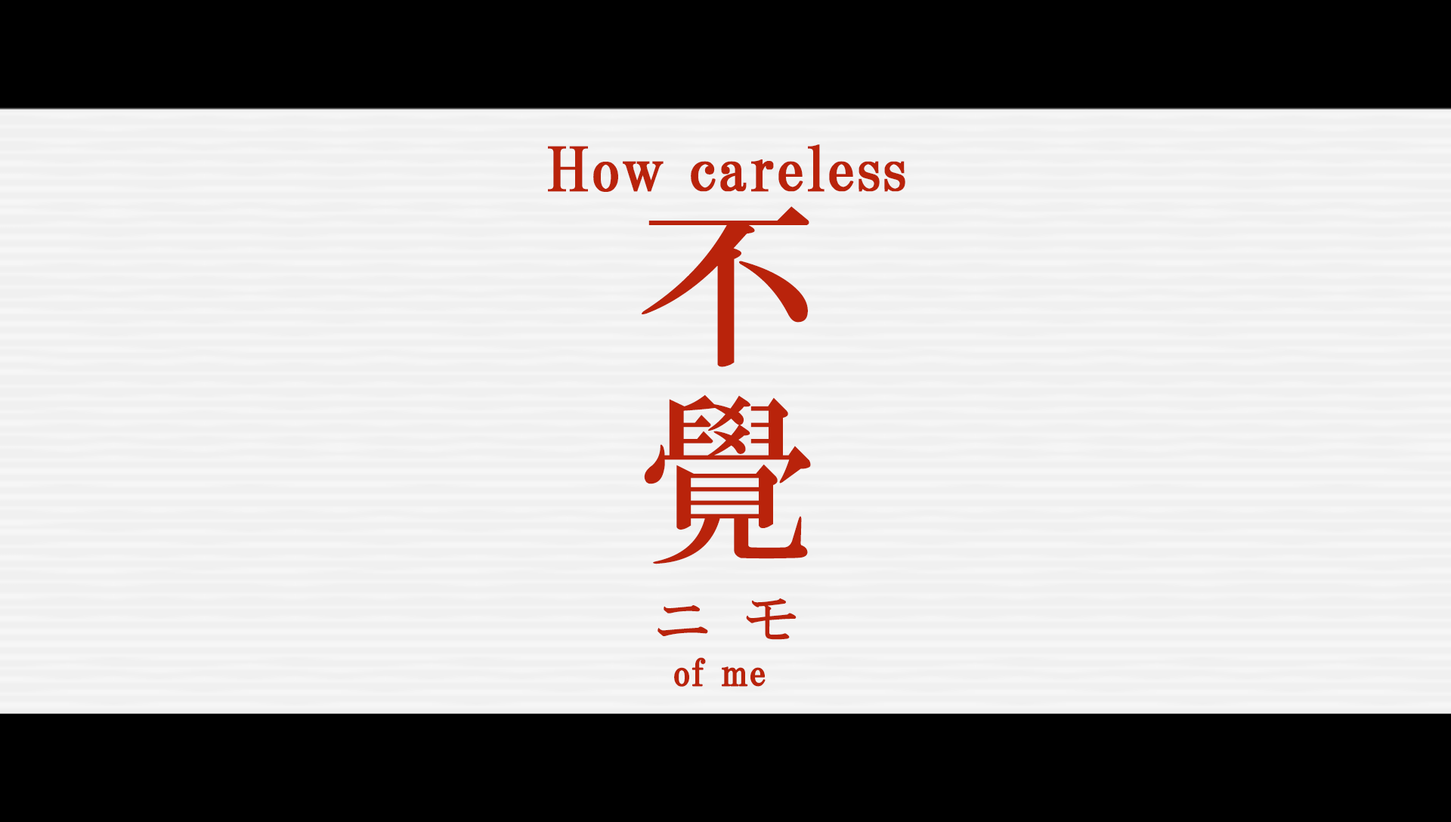
<style>
.page{position:relative;width:1451px;height:822px;background:#f0f0f0}
.page>*{position:absolute;margin:0}
.t1{font:60.4px "HGPMinchoB";letter-spacing:0.01em;color:#b9230b;font-weight:bold}
.t2{font:181.3px/194.2px "HGMinchoB";letter-spacing:0.12em;color:#b9230b}
.t3{font:56.7px "HGMinchoB";letter-spacing:0.56em;color:#b9230b}
.t4{font:36.3px "HGPMinchoB";letter-spacing:0.01em;color:#b9230b;font-weight:bold}
</style>
<div class="page">
<p class="t1" style="left:548px;top:144px;width:357px;height:48px">How careless</p>
<p class="t2" style="left:641px;top:206px;width:170px;height:358px">不<br>覺</p>
<p class="t3" style="left:657px;top:598px;width:139px;height:42px">ニモ</p>
<p class="t4" style="left:674px;top:657px;width:91px;height:30px">of me</p>
</div>
